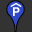
<style>
.page{position:relative;width:32px;height:32px;background:#333333}
.page>*{position:absolute;margin:0}
.t1{font:12px "Arial-BoldMT";color:#ffffff}
</style>
<div class="page">
<p class="t1" style="left:13px;top:7px;width:7px;height:9px">P</p>
</div>
